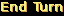
<style>
.page{position:relative;width:64px;height:16px;background:#000000}
.page>*{position:absolute;margin:0}
.t1{font:13px "Meiryo";color:#f0f080;font-weight:bold}
</style>
<div class="page">
<p class="t1" style="left:1px;top:1px;width:61px;height:10px">End Turn</p>
</div>
